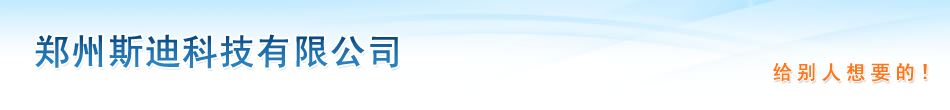
<style>
.page{position:relative;width:950px;height:110px;background:#ffffff}
.page>*{position:absolute;margin:0}
.t1{font:36px "SimHei";font-weight:bold}
.t2{font:20px "SimHei";letter-spacing:0.2em;color:#ff761a;font-weight:bold}
.t3{font:22px "SimHei";letter-spacing:0.2em;color:#ff761a;font-weight:bold}
</style>
<div class="page">
<p class="t1" style="left:35px;top:34px;width:363px;height:35px">郑州斯迪科技有限公司</p>
<p class="t2" style="left:773px;top:62px;width:154px;height:20px">给别人想要的<span class="t3">!</span></p>
</div>
